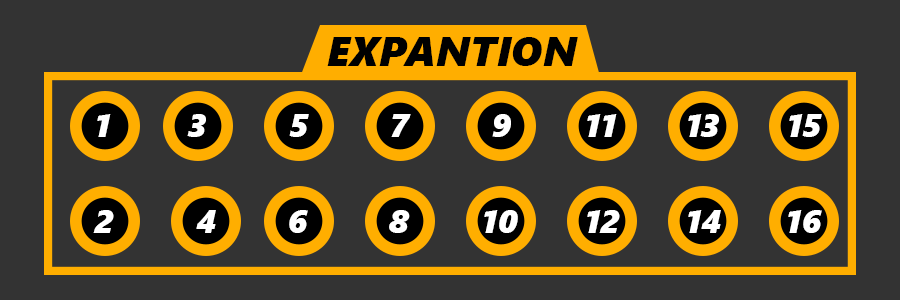
<style>
.page{position:relative;width:900px;height:300px;background:#333333}
.page>*{position:absolute;margin:0}
.t1{font:41.4px "SegoeUIBlack-Italic";color:#000000}
.t2{font:32.7px "SegoeUIBlack-Italic";color:#ffffff}
</style>
<div class="page">
<p class="t1" style="left:327px;top:37px;width:251px;height:29px">EXPANTION</p>
<p class="t2" style="left:97px;top:114px;width:14px;height:23px">1</p>
<p class="t2" style="left:187px;top:114px;width:19px;height:23px">3</p>
<p class="t2" style="left:289px;top:114px;width:20px;height:23px">5</p>
<p class="t2" style="left:391px;top:114px;width:20px;height:23px">7</p>
<p class="t2" style="left:492px;top:114px;width:19px;height:23px">9</p>
<p class="t2" style="left:587px;top:114px;width:30px;height:23px">11</p>
<p class="t2" style="left:688px;top:114px;width:31px;height:23px">13</p>
<p class="t2" style="left:789px;top:114px;width:33px;height:23px">15</p>
<p class="t2" style="left:93px;top:210px;width:21px;height:23px">2</p>
<p class="t2" style="left:196px;top:210px;width:20px;height:23px">4</p>
<p class="t2" style="left:289px;top:210px;width:19px;height:23px">6</p>
<p class="t2" style="left:389px;top:210px;width:21px;height:23px">8</p>
<p class="t2" style="left:484px;top:210px;width:34px;height:23px">10</p>
<p class="t2" style="left:587px;top:210px;width:33px;height:23px">12</p>
<p class="t2" style="left:688px;top:210px;width:33px;height:23px">14</p>
<p class="t2" style="left:788px;top:210px;width:34px;height:23px">16</p>
</div>
